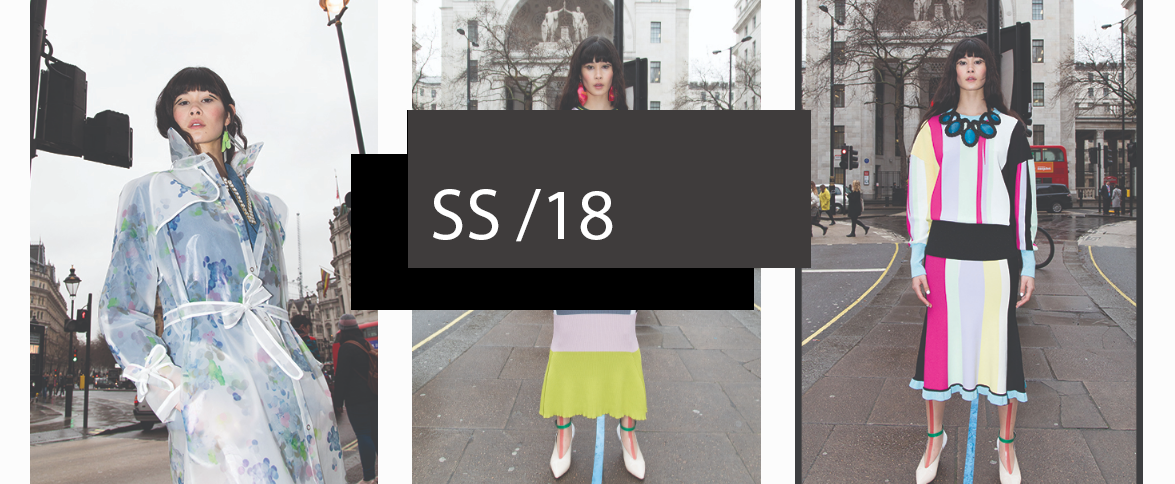
<style>
.page{position:relative;width:1175px;height:484px}
.page>*{position:absolute;margin:0}
.t1{font:72px "MyriadPro-Regular";color:#ffffff}
</style>
<div class="page">
<p class="t1" style="left:433px;top:189px;width:180px;height:53px">SS /18</p>
</div>
